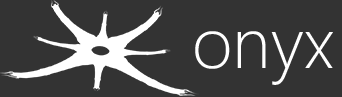
<style>
.page{position:relative;width:342px;height:97px;background:#333333}
.page>*{position:absolute;margin:0}
.t1{font:72px "SegoeWP-Light";color:#ffffff}
</style>
<div class="page">
<p class="t1" style="left:195px;top:31px;width:138px;height:54px">onyx</p>
</div>
